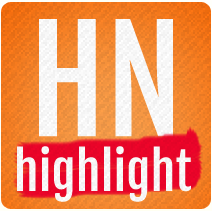
<style>
.page{position:relative;width:212px;height:211px}
.page>*{position:absolute;margin:0}
.t1{font:140px "FjallaOne-Regular";color:#ffffff}
.t2{font:50px "FjallaOne-Regular";color:#ffffff}
</style>
<div class="page">
<p class="t1" style="left:39px;top:19px;width:134px;height:118px">HN</p>
<p class="t2" style="left:17px;top:146px;width:174px;height:56px">highlight</p>
</div>
